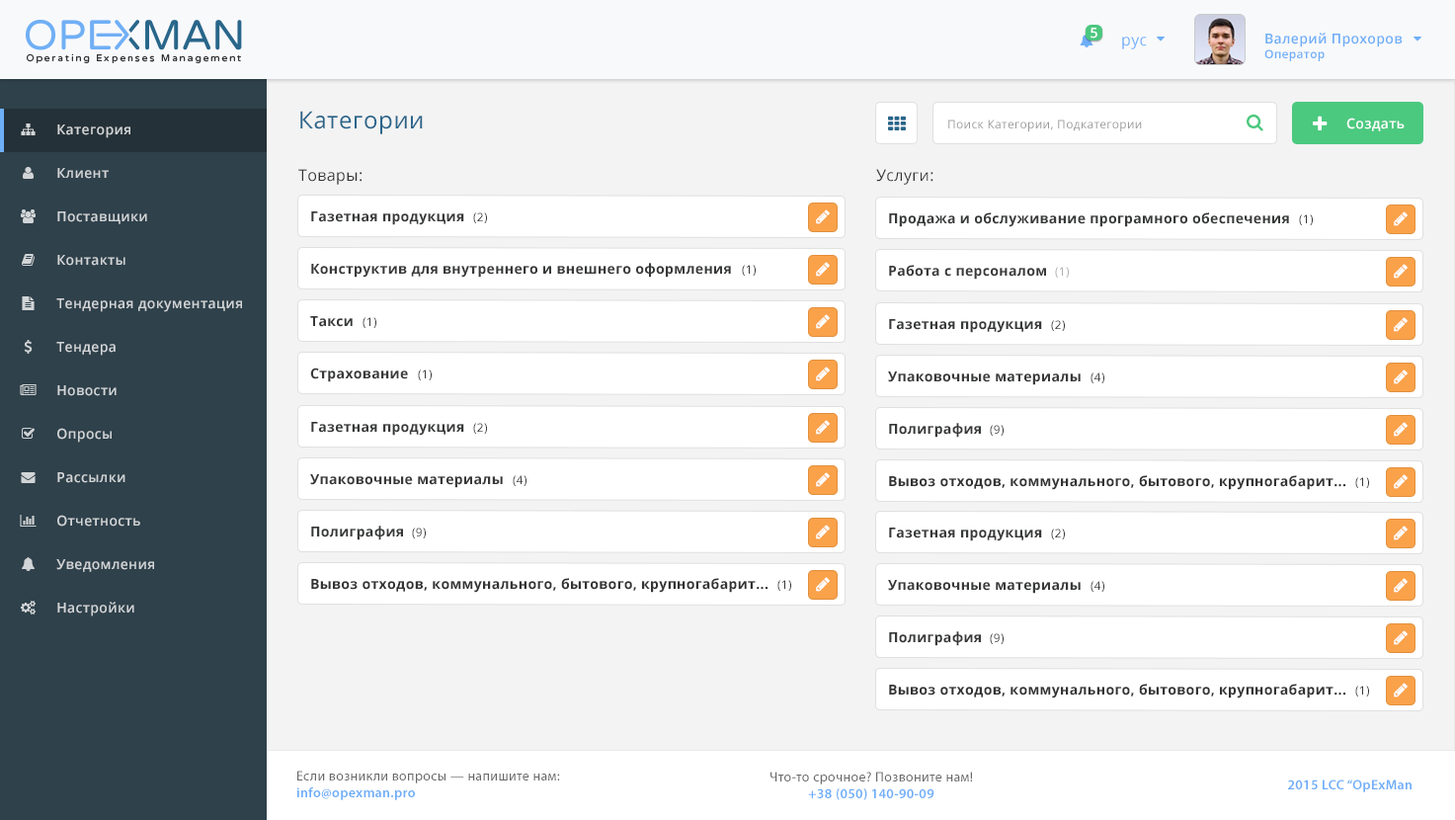
<style>
.page{position:relative;width:1455px;height:820px;background:#ffffff}
.page>*{position:absolute;margin:0}
.t1{font:13.8px "OpenSans-Semibold";letter-spacing:0.025em;color:#ffffff}
.t2{font:15.7px "OpenSans";letter-spacing:0.025em;color:#6eaff8}
.t3{font:13.8px "OpenSans-Semibold";letter-spacing:0.025em;color:#6eaef7}
.t4{font:11.8px "OpenSans-Semibold";letter-spacing:0.025em;color:#6eaef7}
.t5{font:23.7px "OpenSans";letter-spacing:0.025em;color:#29658b}
.t6{font:11.9px "OpenSans";letter-spacing:0.025em;color:#999999}
.t7{font:15.8px "OpenSans";letter-spacing:0.025em;color:#333333}
.t8{font:13.8px "OpenSans-Bold";letter-spacing:0.025em;color:#373838}
.t9{font:11.9px "OpenSans";letter-spacing:0.025em;color:#373838}
.t10{font:11.9px "OpenSans";letter-spacing:0.025em;color:#aeaeae}
.t11{font:13.8px "OpenSans-Bold";letter-spacing:0.025em;color:#333333}
.t12{font:13.8px "MyriadPro-Regular";letter-spacing:0.025em;color:#696969}
.t13{font:13.8px "MyriadPro-Semibold";letter-spacing:0.025em;color:#6eaef8}
</style>
<div class="page">
<p class="t1" style="left:1090px;top:28px;width:7px;height:11px">5</p>
<p class="t2" style="left:1122px;top:37px;width:25px;height:12px">рус</p>
<p class="t3" style="left:1264px;top:33px;width:138px;height:28px">Валерий Прохоров<br><span class="t4">Оператор</span></p>
<p class="t5" style="left:300px;top:111px;width:123px;height:23px">Категории</p>
<p class="t6" style="left:948px;top:119px;width:194px;height:12px">Поиск Категории, Подкатегории</p>
<p class="t1" style="left:1346px;top:118px;width:58px;height:13px">Создать</p>
<p class="t7" style="left:298px;top:169px;width:63px;height:16px">Товары:</p>
<p class="t7" style="left:876px;top:169px;width:57px;height:16px">Услуги:</p>
<p class="t8" style="left:311px;top:211px;width:153px;height:14px">Газетная продукция</p>
<p class="t9" style="left:473px;top:212px;width:14px;height:11px">(2)</p>
<p class="t8" style="left:889px;top:212px;width:400px;height:15px">Продажа и обслуживание програмного обеспечения</p>
<p class="t9" style="left:1299px;top:214px;width:14px;height:11px">(1)</p>
<p class="t8" style="left:311px;top:263px;width:420px;height:15px">Конструктив для внутреннего и внешнего оформления</p>
<p class="t9" style="left:742px;top:265px;width:14px;height:11px">(1)</p>
<p class="t8" style="left:889px;top:265px;width:157px;height:14px">Работа с персоналом</p>
<p class="t10" style="left:1055px;top:267px;width:14px;height:11px">(1)</p>
<p class="t8" style="left:310px;top:316px;width:43px;height:11px">Такси</p>
<p class="t9" style="left:362px;top:317px;width:14px;height:11px">(1)</p>
<p class="t8" style="left:889px;top:319px;width:153px;height:14px">Газетная продукция</p>
<p class="t9" style="left:1051px;top:320px;width:14px;height:11px">(2)</p>
<p class="t8" style="left:310px;top:367px;width:98px;height:15px">Страхование</p>
<p class="t9" style="left:418px;top:369px;width:14px;height:11px">(1)</p>
<p class="t8" style="left:888px;top:371px;width:192px;height:14px">Упаковочные материалы</p>
<p class="t9" style="left:1090px;top:372px;width:14px;height:11px">(4)</p>
<p class="t8" style="left:311px;top:422px;width:153px;height:14px">Газетная продукция</p>
<p class="t9" style="left:473px;top:423px;width:14px;height:11px">(2)</p>
<p class="t8" style="left:889px;top:423px;width:92px;height:15px">Полиграфия</p>
<p class="t9" style="left:990px;top:425px;width:13px;height:11px">(9)</p>
<p class="t8" style="left:310px;top:474px;width:193px;height:14px">Упаковочные материалы</p>
<p class="t9" style="left:513px;top:475px;width:13px;height:11px">(4)</p>
<p class="t11" style="left:889px;top:475px;width:457px;height:15px">Вывоз отходов, коммунального, бытового, крупногабарит...</p>
<p class="t9" style="left:1355px;top:477px;width:14px;height:11px">(1)</p>
<p class="t8" style="left:311px;top:525px;width:92px;height:15px">Полиграфия</p>
<p class="t9" style="left:412px;top:527px;width:14px;height:11px">(9)</p>
<p class="t8" style="left:889px;top:527px;width:153px;height:14px">Газетная продукция</p>
<p class="t9" style="left:1051px;top:528px;width:14px;height:11px">(2)</p>
<p class="t11" style="left:311px;top:578px;width:457px;height:15px">Вывоз отходов, коммунального, бытового, крупногабарит...</p>
<p class="t9" style="left:777px;top:580px;width:14px;height:11px">(1)</p>
<p class="t8" style="left:888px;top:580px;width:192px;height:14px">Упаковочные материалы</p>
<p class="t9" style="left:1090px;top:581px;width:14px;height:11px">(4)</p>
<p class="t8" style="left:889px;top:631px;width:92px;height:15px">Полиграфия</p>
<p class="t9" style="left:990px;top:633px;width:13px;height:11px">(9)</p>
<p class="t11" style="left:889px;top:683px;width:457px;height:15px">Вывоз отходов, коммунального, бытового, крупногабарит...</p>
<p class="t9" style="left:1355px;top:685px;width:14px;height:11px">(1)</p>
<p class="t12" style="left:296px;top:770px;width:264px;height:30px">Если возникли вопросы — напишите нам:<br><span class="t13">info@opexman.pro</span></p>
<p class="t12" style="left:770px;top:771px;width:203px;height:29px;text-align:center">Что-то срочное? Позвоните нам!<br><span class="t13">+38 (050) 140-90-09</span></p>
<p class="t13" style="left:1288px;top:779px;width:123px;height:13px">2015 LCC “OpExMan</p>
</div>
